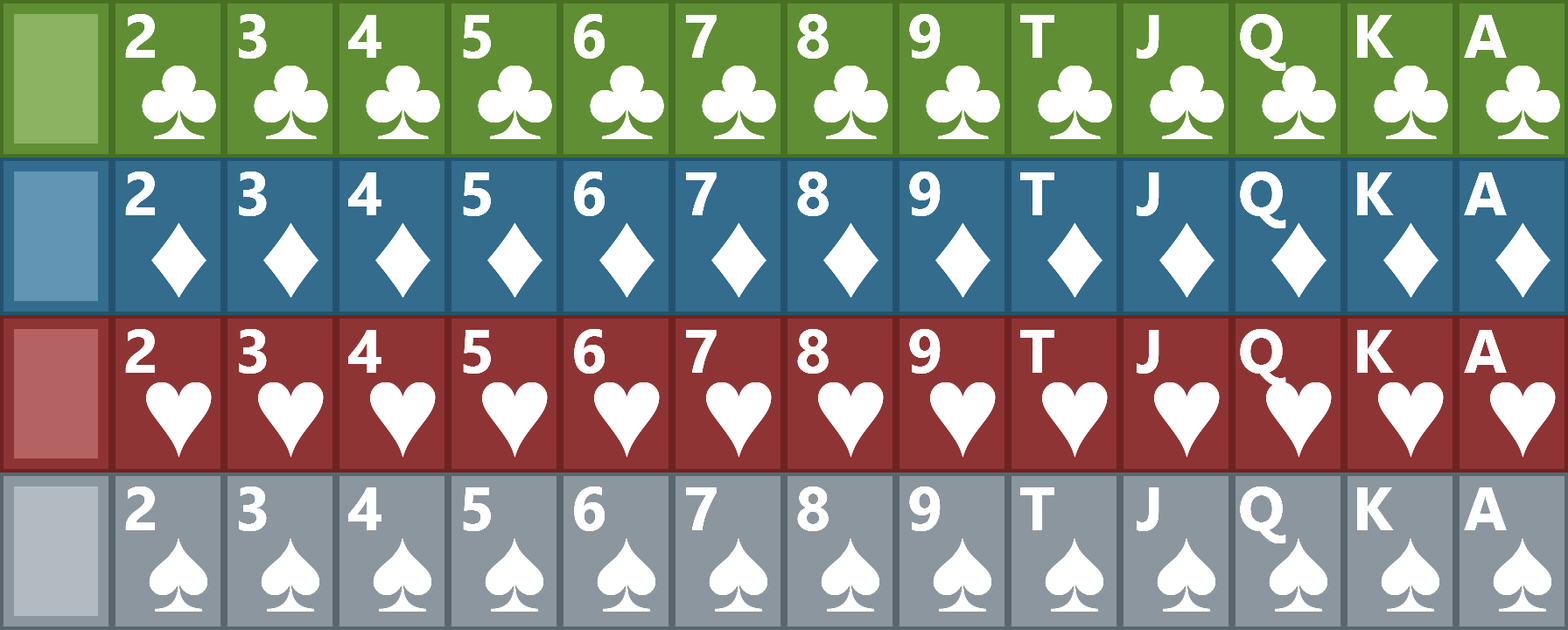
<style>
.page{position:relative;width:1568px;height:630px}
.page>*{position:absolute;margin:0}
.t1{font:14.6px "Gadugi-Bold";color:#ffffff}
.t2{font:29.1px "TimesNewRomanPSMT";color:#ffffff}
</style>
<div class="page">
<p class="t1" style="left:125px;top:14px;width:30px;height:44px;text-align:center">2</p>
<p class="t1" style="left:239px;top:14px;width:28px;height:45px;text-align:center">3</p>
<p class="t1" style="left:348px;top:15px;width:34px;height:43px;text-align:center">4</p>
<p class="t1" style="left:463px;top:15px;width:28px;height:44px;text-align:center">5</p>
<p class="t1" style="left:574px;top:14px;width:31px;height:45px;text-align:center">6</p>
<p class="t1" style="left:686px;top:15px;width:31px;height:43px;text-align:center">7</p>
<p class="t1" style="left:797px;top:14px;width:32px;height:45px;text-align:center">8</p>
<p class="t1" style="left:909px;top:14px;width:32px;height:45px;text-align:center">9</p>
<p class="t1" style="left:1020px;top:15px;width:34px;height:43px;text-align:center">T</p>
<p class="t1" style="left:1137px;top:15px;width:22px;height:44px;text-align:center">J</p>
<p class="t1" style="left:1240px;top:14px;width:46px;height:57px;text-align:center">Q</p>
<p class="t1" style="left:1357px;top:15px;width:37px;height:43px;text-align:center">K</p>
<p class="t1" style="left:1464px;top:15px;width:43px;height:43px;text-align:center">A</p>
<p class="t2" style="left:142px;top:66px;width:74px;height:73px;text-align:center">♣</p>
<p class="t2" style="left:254px;top:66px;width:74px;height:73px;text-align:center">♣</p>
<p class="t2" style="left:366px;top:66px;width:74px;height:73px;text-align:center">♣</p>
<p class="t2" style="left:478px;top:66px;width:74px;height:73px;text-align:center">♣</p>
<p class="t2" style="left:590px;top:66px;width:74px;height:73px;text-align:center">♣</p>
<p class="t2" style="left:702px;top:66px;width:74px;height:73px;text-align:center">♣</p>
<p class="t2" style="left:814px;top:66px;width:74px;height:73px;text-align:center">♣</p>
<p class="t2" style="left:926px;top:66px;width:74px;height:73px;text-align:center">♣</p>
<p class="t2" style="left:1038px;top:66px;width:74px;height:73px;text-align:center">♣</p>
<p class="t2" style="left:1150px;top:66px;width:74px;height:73px;text-align:center">♣</p>
<p class="t2" style="left:1262px;top:66px;width:74px;height:73px;text-align:center">♣</p>
<p class="t2" style="left:1374px;top:66px;width:74px;height:73px;text-align:center">♣</p>
<p class="t2" style="left:1486px;top:66px;width:74px;height:73px;text-align:center">♣</p>
<p class="t1" style="left:125px;top:172px;width:30px;height:43px;text-align:center">2</p>
<p class="t1" style="left:239px;top:172px;width:28px;height:44px;text-align:center">3</p>
<p class="t1" style="left:348px;top:172px;width:34px;height:43px;text-align:center">4</p>
<p class="t1" style="left:463px;top:172px;width:28px;height:44px;text-align:center">5</p>
<p class="t1" style="left:574px;top:172px;width:31px;height:44px;text-align:center">6</p>
<p class="t1" style="left:686px;top:172px;width:31px;height:43px;text-align:center">7</p>
<p class="t1" style="left:797px;top:172px;width:32px;height:44px;text-align:center">8</p>
<p class="t1" style="left:909px;top:172px;width:32px;height:44px;text-align:center">9</p>
<p class="t1" style="left:1020px;top:172px;width:34px;height:43px;text-align:center">T</p>
<p class="t1" style="left:1137px;top:172px;width:22px;height:44px;text-align:center">J</p>
<p class="t1" style="left:1240px;top:172px;width:46px;height:56px;text-align:center">Q</p>
<p class="t1" style="left:1357px;top:172px;width:37px;height:43px;text-align:center">K</p>
<p class="t1" style="left:1464px;top:172px;width:43px;height:43px;text-align:center">A</p>
<p class="t2" style="left:151px;top:223px;width:55px;height:75px;text-align:center">♦</p>
<p class="t2" style="left:263px;top:223px;width:55px;height:75px;text-align:center">♦</p>
<p class="t2" style="left:375px;top:223px;width:55px;height:75px;text-align:center">♦</p>
<p class="t2" style="left:487px;top:223px;width:55px;height:75px;text-align:center">♦</p>
<p class="t2" style="left:599px;top:223px;width:55px;height:75px;text-align:center">♦</p>
<p class="t2" style="left:711px;top:223px;width:55px;height:75px;text-align:center">♦</p>
<p class="t2" style="left:823px;top:223px;width:55px;height:75px;text-align:center">♦</p>
<p class="t2" style="left:935px;top:223px;width:55px;height:75px;text-align:center">♦</p>
<p class="t2" style="left:1047px;top:223px;width:55px;height:75px;text-align:center">♦</p>
<p class="t2" style="left:1159px;top:223px;width:55px;height:75px;text-align:center">♦</p>
<p class="t2" style="left:1271px;top:223px;width:55px;height:75px;text-align:center">♦</p>
<p class="t2" style="left:1383px;top:223px;width:55px;height:75px;text-align:center">♦</p>
<p class="t2" style="left:1495px;top:223px;width:55px;height:75px;text-align:center">♦</p>
<p class="t1" style="left:125px;top:329px;width:30px;height:44px;text-align:center">2</p>
<p class="t1" style="left:239px;top:329px;width:28px;height:45px;text-align:center">3</p>
<p class="t1" style="left:348px;top:330px;width:34px;height:43px;text-align:center">4</p>
<p class="t1" style="left:463px;top:330px;width:28px;height:44px;text-align:center">5</p>
<p class="t1" style="left:574px;top:329px;width:31px;height:45px;text-align:center">6</p>
<p class="t1" style="left:686px;top:330px;width:31px;height:43px;text-align:center">7</p>
<p class="t1" style="left:797px;top:329px;width:32px;height:45px;text-align:center">8</p>
<p class="t1" style="left:909px;top:329px;width:32px;height:45px;text-align:center">9</p>
<p class="t1" style="left:1020px;top:330px;width:34px;height:43px;text-align:center">T</p>
<p class="t1" style="left:1137px;top:330px;width:22px;height:44px;text-align:center">J</p>
<p class="t1" style="left:1240px;top:329px;width:46px;height:57px;text-align:center">Q</p>
<p class="t1" style="left:1357px;top:330px;width:37px;height:43px;text-align:center">K</p>
<p class="t1" style="left:1464px;top:330px;width:43px;height:43px;text-align:center">A</p>
<p class="t2" style="left:146px;top:382px;width:66px;height:76px;text-align:center">♥</p>
<p class="t2" style="left:258px;top:382px;width:66px;height:76px;text-align:center">♥</p>
<p class="t2" style="left:370px;top:382px;width:66px;height:76px;text-align:center">♥</p>
<p class="t2" style="left:482px;top:382px;width:66px;height:76px;text-align:center">♥</p>
<p class="t2" style="left:594px;top:382px;width:66px;height:76px;text-align:center">♥</p>
<p class="t2" style="left:706px;top:382px;width:66px;height:76px;text-align:center">♥</p>
<p class="t2" style="left:818px;top:382px;width:66px;height:76px;text-align:center">♥</p>
<p class="t2" style="left:930px;top:382px;width:66px;height:76px;text-align:center">♥</p>
<p class="t2" style="left:1042px;top:382px;width:66px;height:76px;text-align:center">♥</p>
<p class="t2" style="left:1154px;top:382px;width:66px;height:76px;text-align:center">♥</p>
<p class="t2" style="left:1266px;top:382px;width:66px;height:76px;text-align:center">♥</p>
<p class="t2" style="left:1378px;top:382px;width:66px;height:76px;text-align:center">♥</p>
<p class="t2" style="left:1490px;top:382px;width:66px;height:76px;text-align:center">♥</p>
<p class="t1" style="left:125px;top:486px;width:30px;height:44px;text-align:center">2</p>
<p class="t1" style="left:239px;top:486px;width:28px;height:45px;text-align:center">3</p>
<p class="t1" style="left:348px;top:487px;width:34px;height:43px;text-align:center">4</p>
<p class="t1" style="left:463px;top:487px;width:28px;height:44px;text-align:center">5</p>
<p class="t1" style="left:574px;top:486px;width:31px;height:45px;text-align:center">6</p>
<p class="t1" style="left:686px;top:487px;width:31px;height:43px;text-align:center">7</p>
<p class="t1" style="left:797px;top:486px;width:32px;height:45px;text-align:center">8</p>
<p class="t1" style="left:909px;top:486px;width:32px;height:45px;text-align:center">9</p>
<p class="t1" style="left:1020px;top:487px;width:34px;height:43px;text-align:center">T</p>
<p class="t1" style="left:1137px;top:487px;width:22px;height:44px;text-align:center">J</p>
<p class="t1" style="left:1240px;top:486px;width:46px;height:57px;text-align:center">Q</p>
<p class="t1" style="left:1357px;top:487px;width:37px;height:43px;text-align:center">K</p>
<p class="t1" style="left:1464px;top:487px;width:43px;height:43px;text-align:center">A</p>
<p class="t2" style="left:149px;top:538px;width:58px;height:74px;text-align:center">♠</p>
<p class="t2" style="left:261px;top:538px;width:58px;height:74px;text-align:center">♠</p>
<p class="t2" style="left:373px;top:538px;width:58px;height:74px;text-align:center">♠</p>
<p class="t2" style="left:485px;top:538px;width:58px;height:74px;text-align:center">♠</p>
<p class="t2" style="left:597px;top:538px;width:58px;height:74px;text-align:center">♠</p>
<p class="t2" style="left:709px;top:538px;width:58px;height:74px;text-align:center">♠</p>
<p class="t2" style="left:821px;top:538px;width:58px;height:74px;text-align:center">♠</p>
<p class="t2" style="left:933px;top:538px;width:58px;height:74px;text-align:center">♠</p>
<p class="t2" style="left:1045px;top:538px;width:58px;height:74px;text-align:center">♠</p>
<p class="t2" style="left:1157px;top:538px;width:58px;height:74px;text-align:center">♠</p>
<p class="t2" style="left:1269px;top:538px;width:58px;height:74px;text-align:center">♠</p>
<p class="t2" style="left:1381px;top:538px;width:58px;height:74px;text-align:center">♠</p>
<p class="t2" style="left:1493px;top:538px;width:58px;height:74px;text-align:center">♠</p>
</div>
